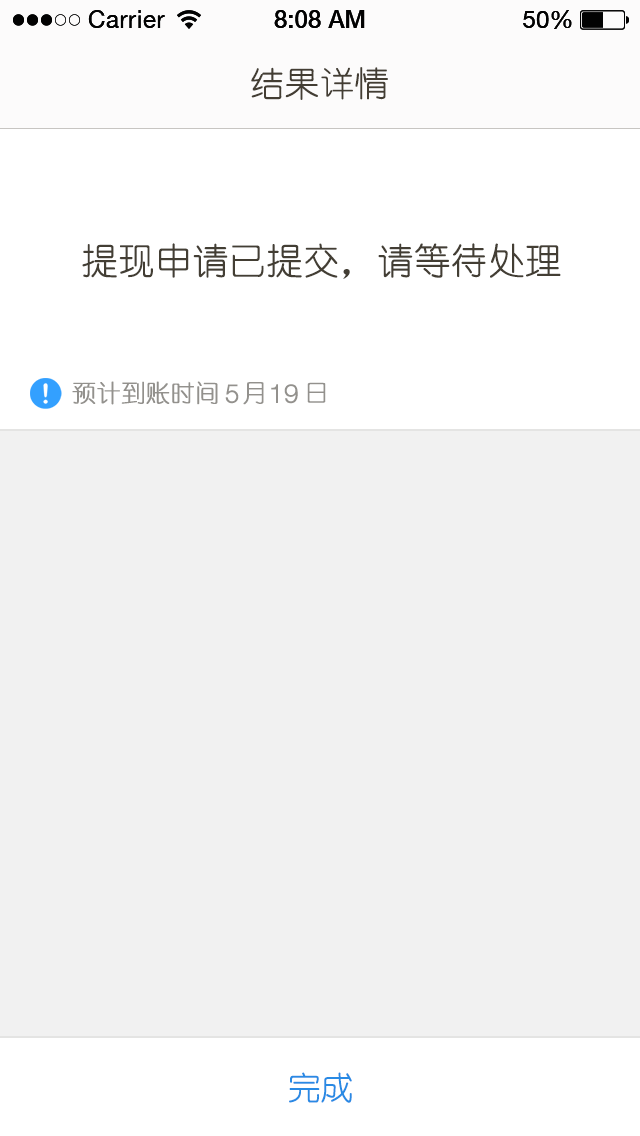
<style>
.page{position:relative;width:640px;height:1136px;background:#f1f1f1}
.page>*{position:absolute;margin:0}
.t1{font:34px "YouYuan";color:#433d33;text-transform:uppercase;font-weight:bold}
.t2{font:36px "YouYuan";color:#433e34;text-transform:uppercase;font-weight:bold}
.t3{font:24px "YouYuan";color:#93918d;text-transform:uppercase;font-weight:bold}
.t4{font:26px "HelveticaNeueLTPro-Lt";color:#93918d;text-transform:uppercase;font-weight:bold}
.t5{font:32px "YouYuan";color:#298ae4;text-transform:uppercase;font-weight:bold}
</style>
<div class="page">
<p class="t1" style="left:251px;top:67px;width:137px;height:33px">结果详情</p>
<p class="t2" style="left:82px;top:243px;width:479px;height:36px">提现申请已提交，请等待处理</p>
<p class="t3" style="left:72px;top:381px;width:146px;height:24px">预计到账时间</p>
<p class="t4" style="left:225px;top:384px;width:14px;height:20px">5</p>
<p class="t3" style="left:243px;top:382px;width:21px;height:23px">月</p>
<p class="t4" style="left:271px;top:384px;width:27px;height:20px">19</p>
<p class="t3" style="left:307px;top:382px;width:19px;height:21px">日</p>
<p class="t5" style="left:289px;top:1072px;width:63px;height:31px">完成</p>
</div>
